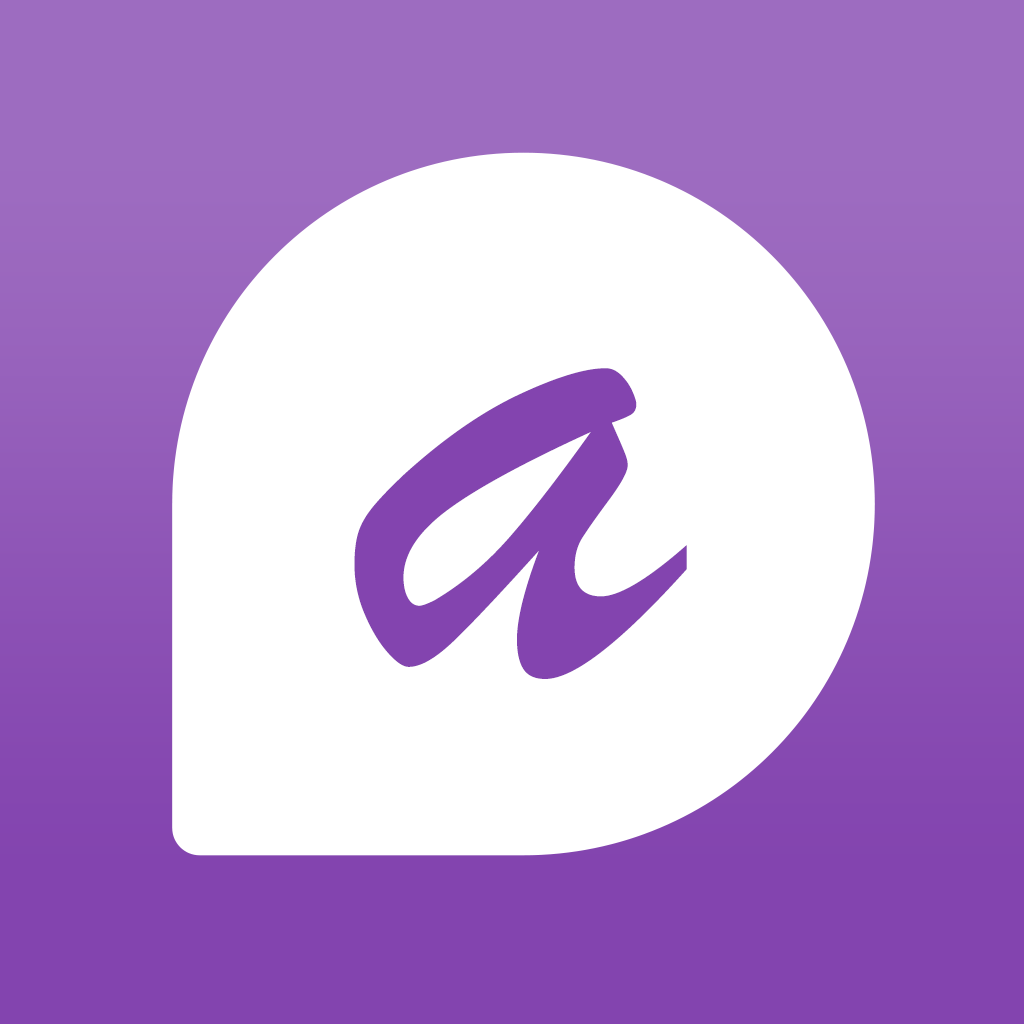
<style>
.page{position:relative;width:1024px;height:1024px;background:#ffffff}
.page>*{position:absolute;margin:0}
.t1{font:800px "BrushScriptMT";color:#8344af}
</style>
<div class="page">
<p class="t1" style="left:354px;top:368px;width:333px;height:311px">a</p>
</div>
